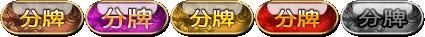
<style>
.page{position:relative;width:425px;height:37px}
.page>*{position:absolute;margin:0}
.t1{font:17.6px "STXihei";color:#868585;font-weight:bold;scale:1.38 1}
</style>
<div class="page">
<p class="t1" style="left:358px;top:9px;width:49px;height:18px">分牌</p>
</div>
